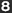
<style>
.page{position:relative;width:12px;height:13px}
.page>*{position:absolute;margin:0}
.t1{font:13.9px "K2D-ExtraBold";color:#ffffff}
</style>
<div class="page">
<p class="t1" style="left:1px;top:1px;width:9px;height:11px">8</p>
</div>
